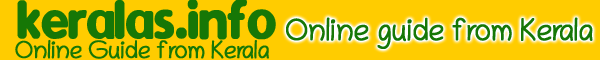
<style>
.page{position:relative;width:600px;height:60px;background:#ffcc00}
.page>*{position:absolute;margin:0}
.t1{font:62.5px "Dyuthi";letter-spacing:-0.01em;color:#167706;font-weight:bold;scale:0.9 1}
.t2{font:31.2px "Chilanka-Regular";letter-spacing:-0.01em;color:#167706;font-weight:bold;scale:0.9 1}
.t3{font:25px "Chilanka-Regular";letter-spacing:-0.01em;color:#167706;font-weight:bold;scale:0.9 1}
</style>
<div class="page">
<p class="t1" style="left:17px;top:0px;width:259px;height:40px">keralas.info</p>
<p class="t2" style="left:286px;top:17px;width:307px;height:32px">Online guide from Kerala</p>
<p class="t3" style="left:15px;top:40px;width:254px;height:19px">Online Guide from Kerala</p>
</div>
